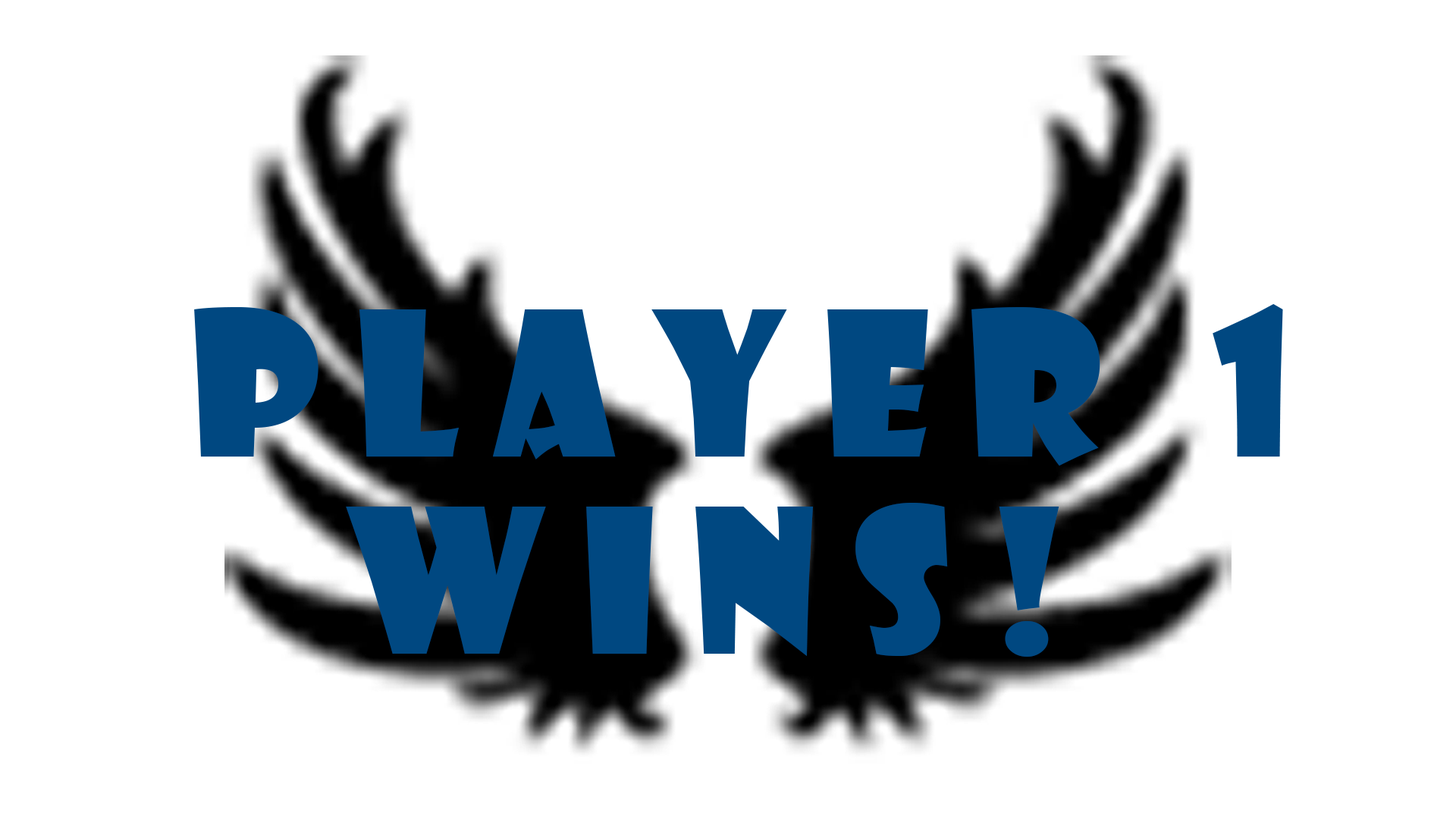
<style>
.page{position:relative;width:1456px;height:819px;background:#ffffff}
.page>*{position:absolute;margin:0}
.t1{font:195.9px "ShowcardGothic-Reg";letter-spacing:0.18em;color:#004881}
</style>
<div class="page">
<p class="t1" style="left:194px;top:304px;width:1089px;height:162px">PLAYER 1</p>
<p class="t1" style="left:346px;top:503px;width:713px;height:154px">WINS!</p>
</div>
